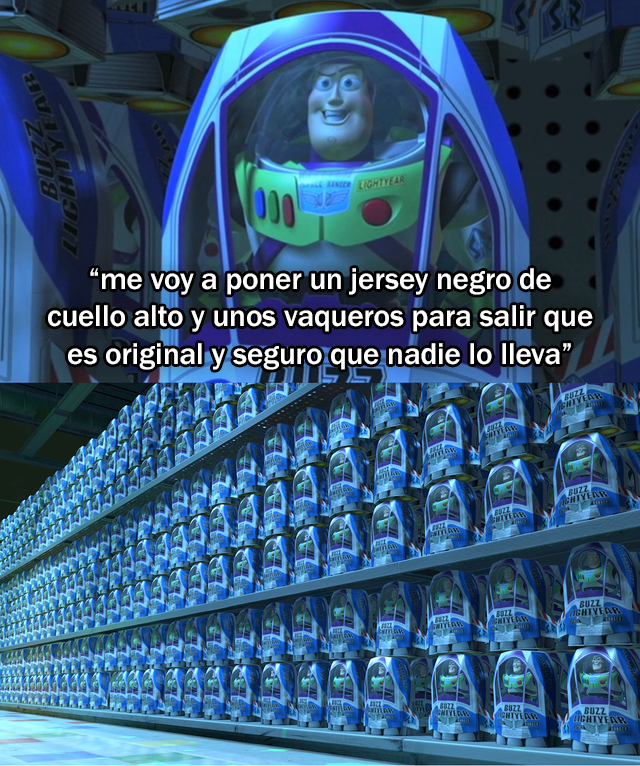
<style>
.page{position:relative;width:640px;height:766px}
.page>*{position:absolute;margin:0}
.t1{font:30.9px "FranklinGothic-Medium";color:#ffffff}
</style>
<div class="page">
<p class="t1" style="left:48px;top:268px;width:545px;height:102px;text-align:center">“me voy a poner un jersey negro de<br>cuello alto y unos vaqueros para salir que<br>es original y seguro que nadie lo lleva”</p>
</div>
